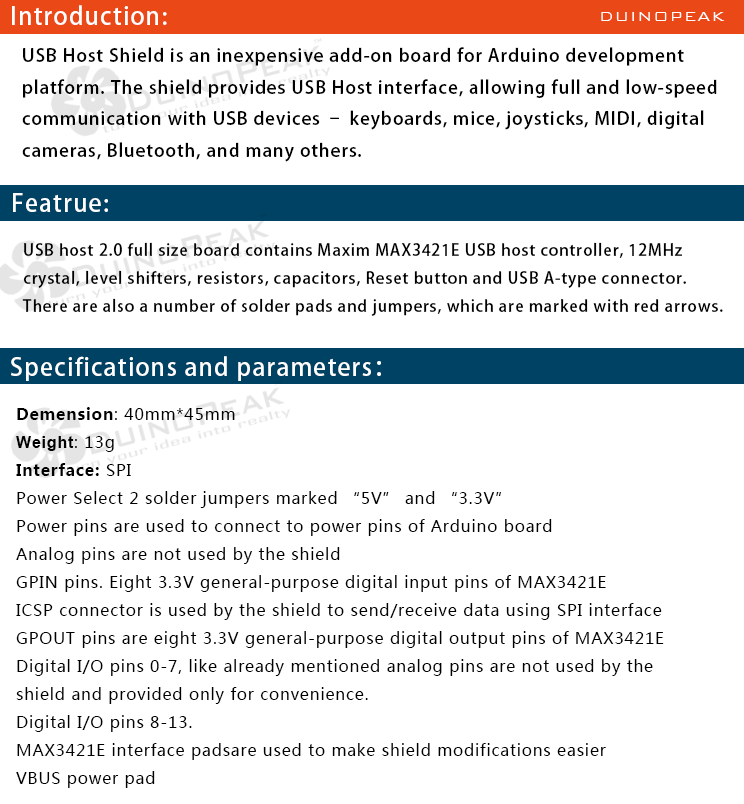
<style>
.page{position:relative;width:744px;height:804px;background:#ffffff}
.page>*{position:absolute;margin:0}
.t1{font:24px "AdobeHeitiStd-Regular";letter-spacing:0.05em;color:#ffffff}
.t2{font:18px "BankGothicBT-Light";letter-spacing:0.05em;color:#ffffff}
.t3{font:18px "AdobeHeitiStd-Regular";letter-spacing:0.05em;color:#000000}
.t4{font:16px "AdobeHeitiStd-Regular";letter-spacing:0.05em;color:#000000}
.t5{font:16px "MicrosoftYaHei";letter-spacing:0.05em;color:#000000}
.t6{font:16px "MicrosoftYaHei-Bold";letter-spacing:0.05em;color:#000000}
.t7{font:16px "Arial-BoldMT";letter-spacing:0.05em;color:#000000}
</style>
<div class="page">
<p class="t1" style="left:12px;top:5px;width:155px;height:20px">Introduction:</p>
<p class="t2" style="left:601px;top:12px;width:124px;height:9px">DUINOPEAK</p>
<p class="t3" style="left:22px;top:47px;width:695px;height:115px">USB Host Shield is an inexpensive add-on board for Arduino development <br>platform. The shield provides USB Host interface, allowing full and low-speed <br>communication with USB devices – keyboards, mice, joysticks, MIDI, digital <br>cameras, Bluetooth, and many others.</p>
<p class="t1" style="left:13px;top:193px;width:95px;height:19px">Featrue:</p>
<p class="t4" style="left:22px;top:242px;width:701px;height:74px">USB host 2.0 full size board contains Maxim MAX3421E USB host controller, 12MHz <br>crystal, level shifters, resistors, capacitors, Reset button and USB A-type connector.<br>There are also a number of solder pads and jumpers, which are marked with red arrows.</p>
<p class="t1" style="left:11px;top:356px;width:370px;height:25px">Specifications and parameters：</p>
<p class="t5" style="left:16px;top:407px;width:648px;height:381px"><span class="t6">Demension</span>: 40mm*45mm<br><span class="t7">Weight</span>: 13g<br><span class="t6">Interface: </span>SPI<br>Power Select 2 solder jumpers marked “5V” and “3.3V”<br>Power pins are used to connect to power pins of Arduino board<br>Analog pins are not used by the shield<br>GPIN pins. Eight 3.3V general-purpose digital input pins of MAX3421E<br>ICSP connector is used by the shield to send/receive data using SPI interface<br>GPOUT pins are eight 3.3V general-purpose digital output pins of MAX3421E<br>Digital I/O pins 0-7, like already mentioned analog pins are not used by the <br>shield and provided only for convenience.<br>Digital I/O pins 8-13.<br>MAX3421E interface padsare used to make shield modifications easier<br>VBUS power pad</p>
</div>
